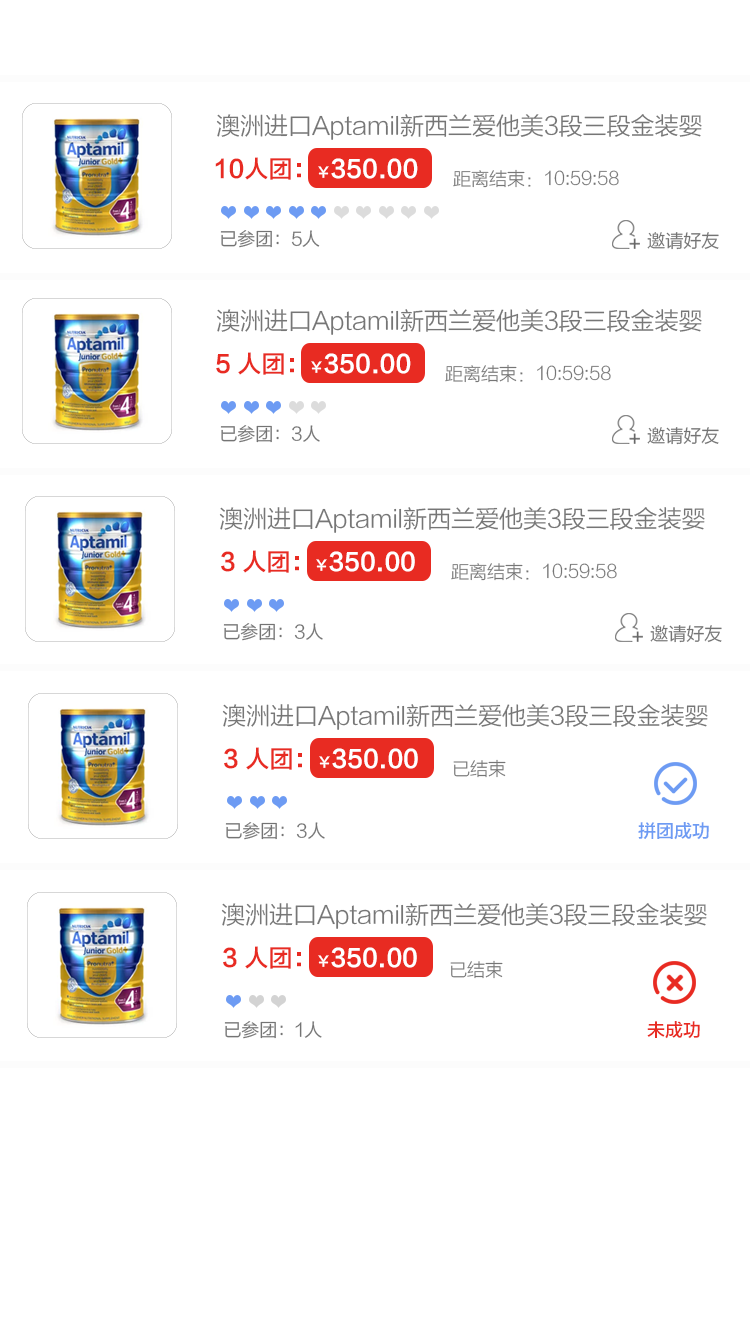
<style>
.page{position:relative;width:750px;height:1334px;background:#ffffff}
.page>*{position:absolute;margin:0}
.t1{font:24px "FZLTXIHK--GBK1-0";color:#767676}
.t2{font:18px "FZLTXHJW--GB1-0";color:#767676}
.t3{font:18px "FZLTXIHK--GBK1-0";color:#747474}
.t4{font:18px "FZLTZHK--GBK1-0";color:#6d9bf3}
.t5{font:18px "FZLTZHK--GBK1-0";color:#e82b22}
</style>
<div class="page">
<p class="t1" style="left:216px;top:114px;width:486px;height:26px">澳洲进口Aptamil新西兰爱他美3段三段金装婴</p>
<p class="t2" style="left:453px;top:169px;width:166px;height:19px">距离结束：10:59:58</p>
<p class="t3" style="left:220px;top:230px;width:100px;height:18px">已参团：5人</p>
<p class="t3" style="left:647px;top:232px;width:72px;height:18px">邀请好友</p>
<p class="t1" style="left:216px;top:309px;width:486px;height:26px">澳洲进口Aptamil新西兰爱他美3段三段金装婴</p>
<p class="t2" style="left:445px;top:364px;width:166px;height:19px">距离结束：10:59:58</p>
<p class="t3" style="left:220px;top:425px;width:100px;height:18px">已参团：3人</p>
<p class="t3" style="left:647px;top:427px;width:72px;height:18px">邀请好友</p>
<p class="t1" style="left:219px;top:507px;width:486px;height:26px">澳洲进口Aptamil新西兰爱他美3段三段金装婴</p>
<p class="t2" style="left:451px;top:562px;width:166px;height:19px">距离结束：10:59:58</p>
<p class="t3" style="left:223px;top:623px;width:100px;height:18px">已参团：3人</p>
<p class="t3" style="left:650px;top:625px;width:72px;height:18px">邀请好友</p>
<p class="t1" style="left:222px;top:704px;width:486px;height:26px">澳洲进口Aptamil新西兰爱他美3段三段金装婴</p>
<p class="t2" style="left:453px;top:759px;width:53px;height:19px">已结束</p>
<p class="t3" style="left:225px;top:822px;width:100px;height:18px">已参团：3人</p>
<p class="t4" style="left:638px;top:822px;width:71px;height:18px">拼团成功</p>
<p class="t1" style="left:221px;top:903px;width:486px;height:26px">澳洲进口Aptamil新西兰爱他美3段三段金装婴</p>
<p class="t2" style="left:450px;top:960px;width:53px;height:19px">已结束</p>
<p class="t3" style="left:224px;top:1021px;width:98px;height:18px">已参团：1人</p>
<p class="t5" style="left:647px;top:1021px;width:53px;height:18px">未成功</p>
</div>
